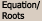
<style>
.page{position:relative;width:42px;height:21px;background:#d9cdc1}
.page>*{position:absolute;margin:0}
.t1{font:9px "Tahoma";color:#000000}
</style>
<div class="page">
<p class="t1" style="left:2px;top:1px;width:38px;height:18px">Equation/<br>Roots</p>
</div>
